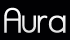
<style>
.page{position:relative;width:70px;height:40px;background:#010103}
.page>*{position:absolute;margin:0}
.t1{font:40px "Asenine";color:#ffffff;font-weight:bold}
</style>
<div class="page">
<p class="t1" style="left:4px;top:7px;width:62px;height:26px">Aura</p>
</div>
